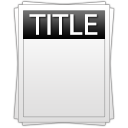
<style>
.page{position:relative;width:128px;height:128px;background:#ffffff}
.page>*{position:absolute;margin:0}
.t1{font:30px "MyriadWebPro";color:#fefefe}
</style>
<div class="page">
<p class="t1" style="left:29px;top:14px;width:69px;height:21px">TITLE</p>
</div>
